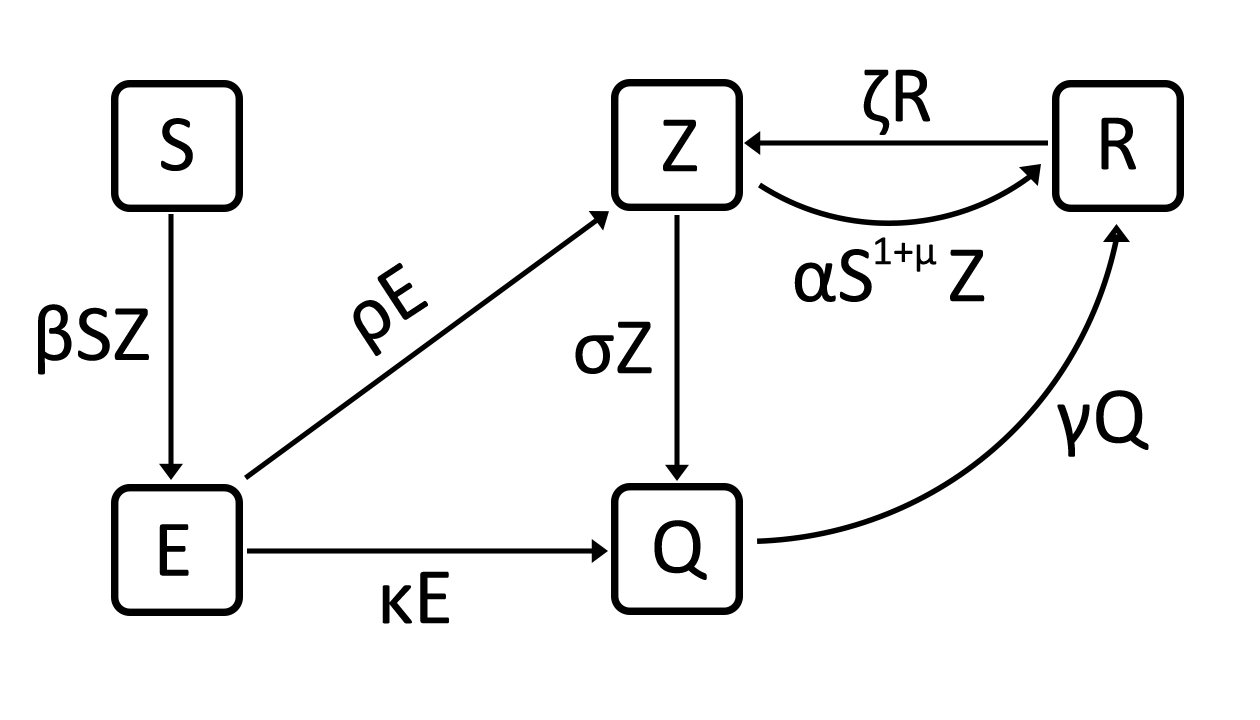
<style>
.page{position:relative;width:1260px;height:720px;background:#ffffff}
.page>*{position:absolute;margin:0}
.t1{font:81.1px "Calibri";color:#000000}
.t2{font:41.7px "Calibri";color:#000000}
</style>
<div class="page">
<p class="t1" style="left:863px;top:69px;width:68px;height:66px">ζR</p>
<p class="t1" style="left:161px;top:118px;width:32px;height:53px">S</p>
<p class="t1" style="left:663px;top:119px;width:34px;height:53px">Z</p>
<p class="t1" style="left:1101px;top:117px;width:35px;height:53px">R</p>
<p class="t2" style="left:875px;top:237px;width:62px;height:35px">1+μ</p>
<p class="t1" style="left:794px;top:249px;width:191px;height:53px">αS    Z</p>
<p class="t1" style="left:353px;top:262px;width:75px;height:94px;rotate:-33deg">ρE</p>
<p class="t1" style="left:38px;top:304px;width:111px;height:71px">βSZ</p>
<p class="t1" style="left:575px;top:321px;width:77px;height:53px">σZ</p>
<p class="t1" style="left:1057px;top:390px;width:92px;height:67px">γQ</p>
<p class="t1" style="left:654px;top:520px;width:53px;height:60px">Q</p>
<p class="t1" style="left:159px;top:524px;width:30px;height:52px">E</p>
<p class="t1" style="left:382px;top:571px;width:67px;height:53px">κE</p>
</div>
